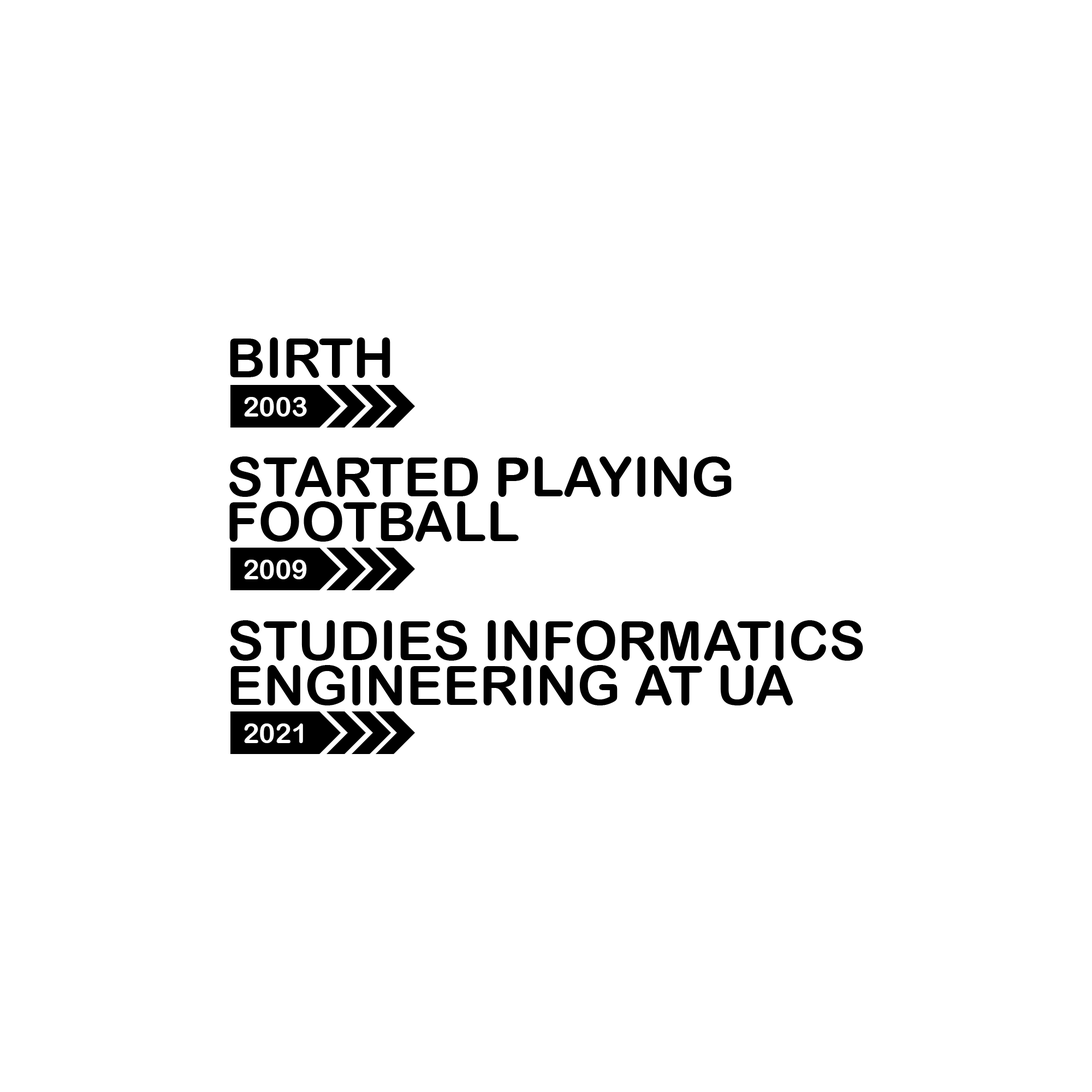
<style>
.page{position:relative;width:1092px;height:1092px;background:#ffffff}
.page>*{position:absolute;margin:0}
.t1{font:54.6px "ArialRoundedMTBold";color:#000000}
.t2{font:27.3px "ArialRoundedMTBold";color:#ffffff}
</style>
<div class="page">
<p class="t1" style="left:230px;top:337px;width:160px;height:41px">BIRTH</p>
<p class="t2" style="left:244px;top:397px;width:63px;height:20px">2003</p>
<p class="t1" style="left:229px;top:456px;width:503px;height:41px">STARTED PLAYING</p>
<p class="t1" style="left:229px;top:501px;width:290px;height:41px">FOOTBALL</p>
<p class="t2" style="left:244px;top:560px;width:63px;height:19px">2009</p>
<p class="t1" style="left:230px;top:620px;width:633px;height:41px">STUDIES INFORMATICS</p>
<p class="t1" style="left:230px;top:665px;width:563px;height:40px">ENGINEERING AT UA</p>
<p class="t2" style="left:244px;top:723px;width:59px;height:20px">2021</p>
</div>
